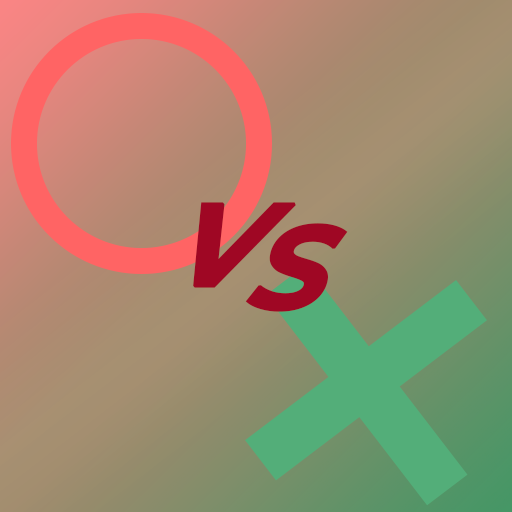
<style>
.page{position:relative;width:512px;height:512px}
.page>*{position:absolute;margin:0}
.t1{font:117.8px "Montserrat-BoldItalic";letter-spacing:0.01em;color:#9f0724;font-weight:bold;font-style:italic}
.t2{font:118.6px "Montserrat-BoldItalic";letter-spacing:0.01em;color:#9f0724;font-weight:bold;font-style:italic}
</style>
<div class="page">
<p class="t1" style="left:193px;top:202px;width:103px;height:86px">V</p>
<p class="t2" style="left:245px;top:223px;width:103px;height:89px">S</p>
</div>
